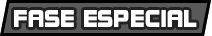
<style>
.page{position:relative;width:212px;height:36px;background:#ffffff}
.page>*{position:absolute;margin:0}
.t1{font:26.7px "DFSoGeiStd-W9";color:#ffffff;scale:0.83 1}
</style>
<div class="page">
<p class="t1" style="left:14px;top:10px;width:183px;height:17px">FASE ESPECIAL</p>
</div>
